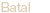
<style>
.page{position:relative;width:50px;height:13px;background:#ffffff}
.page>*{position:absolute;margin:0}
.t1{font:12px "GothicMB101Pro-Regular";letter-spacing:-0.04em;color:#dfceb7}
</style>
<div class="page">
<p class="t1" style="left:1px;top:2px;width:29px;height:10px">Batal</p>
</div>
